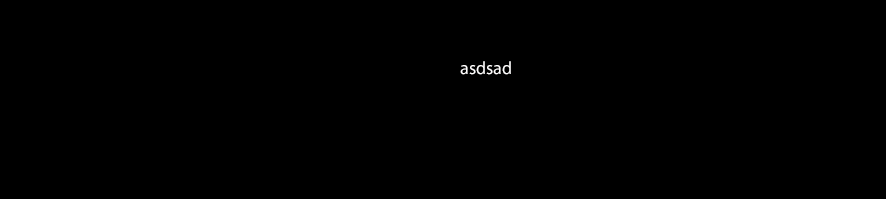
<style>
.page{position:relative;width:886px;height:199px;background:#000000}
.page>*{position:absolute;margin:0}
.t1{font:18px "MyriadPro-Regular";color:#fffefe}
</style>
<div class="page">
<p class="t1" style="left:460px;top:61px;width:51px;height:14px">asdsad</p>
</div>
